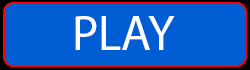
<style>
.page{position:relative;width:250px;height:70px;background:#005dd3}
.page>*{position:absolute;margin:0}
.t1{font:49.5px "MyriadPro-Regular";color:#ffffff}
</style>
<div class="page">
<p class="t1" style="left:75px;top:16px;width:100px;height:34px">PLAY</p>
</div>
